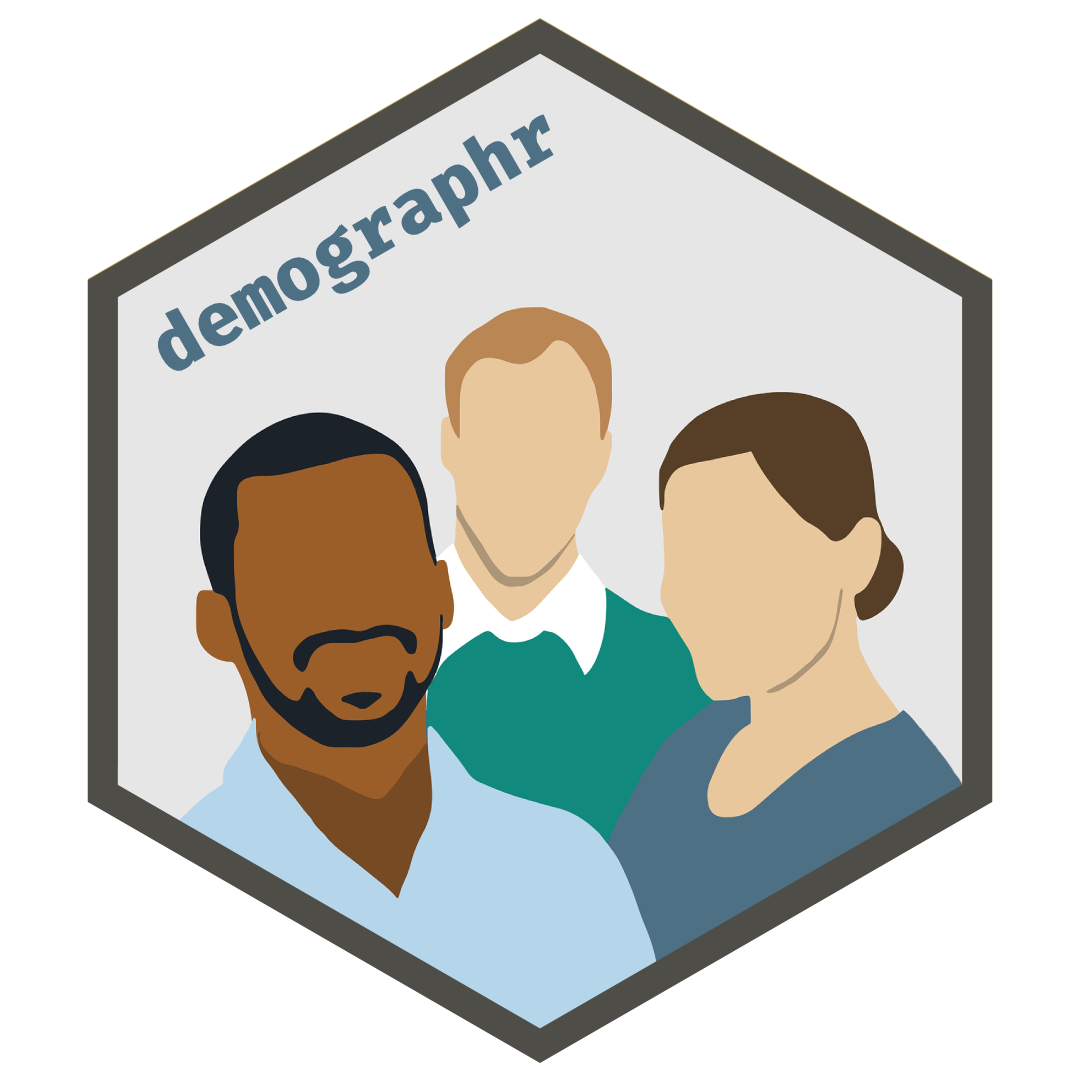
<style>
.page{position:relative;width:1080px;height:1080px;background:#ffffff}
.page>*{position:absolute;margin:0}
.t1{font:75px "FiraCode-Bold";color:#4d7084;font-weight:bold}
</style>
<div class="page">
<p class="t1" style="left:157px;top:114px;width:397px;height:258px;rotate:-30deg">demographr</p>
</div>
